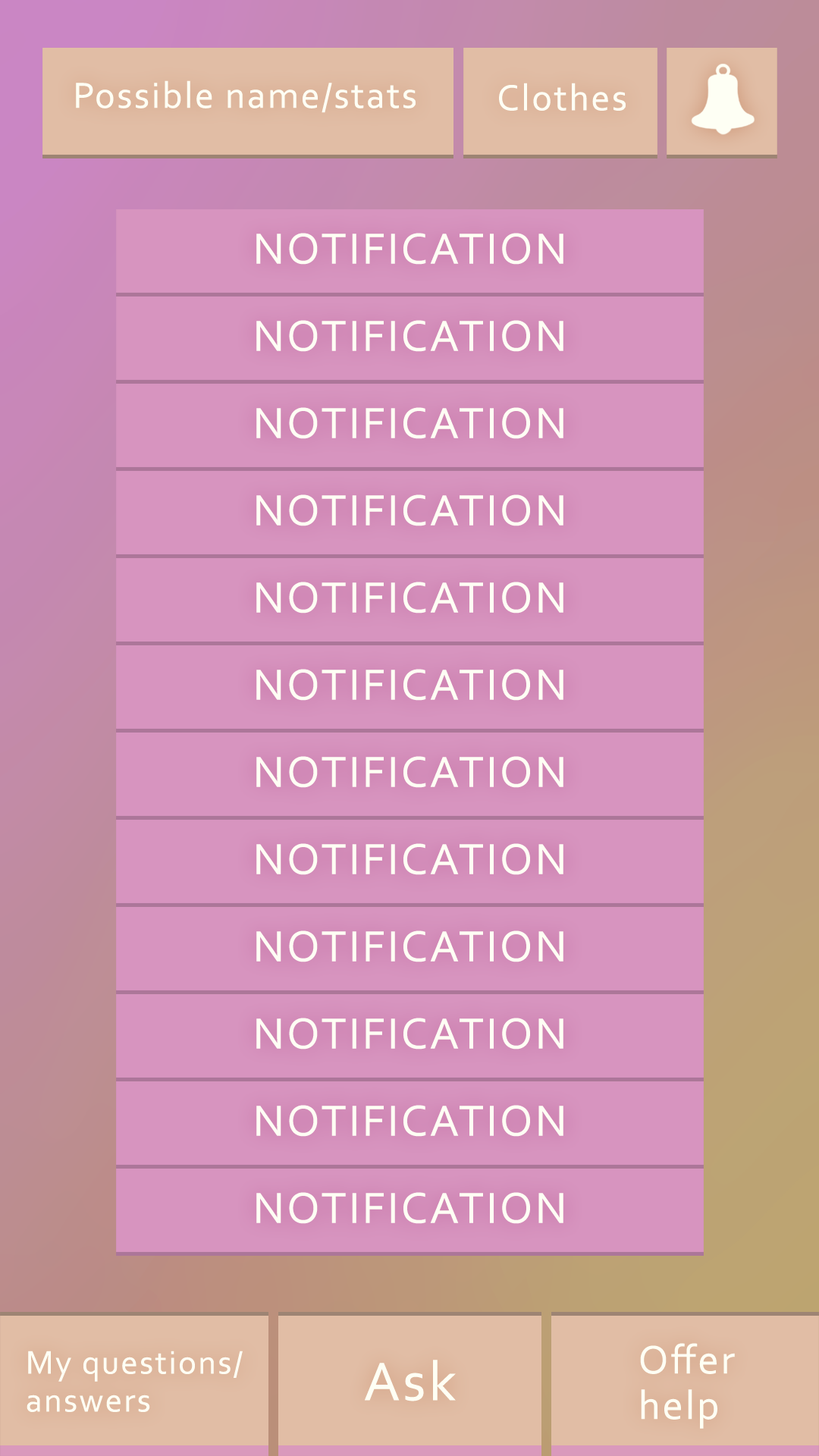
<style>
.page{position:relative;width:819px;height:1456px;background:#d794bf}
.page>*{position:absolute;margin:0}
.t1{font:37.9px "Corbel";letter-spacing:0.05em;color:#fefff4}
.t2{font:45.5px/87.2px "Corbel";letter-spacing:0.05em;color:#fefff4}
.t3{font:41.7px/45.5px "Corbel";letter-spacing:0.05em;color:#fefff4}
.t4{font:34.1px/37.9px "Corbel";letter-spacing:0.05em;color:#fefff4}
.t5{font:56.9px "Corbel";letter-spacing:0.05em;color:#fefff4}
</style>
<div class="page">
<p class="t1" style="left:76px;top:80px;width:340px;height:33px">Possible name/stats</p>
<p class="t1" style="left:499px;top:83px;width:127px;height:28px">Clothes</p>
<p class="t2" style="left:256px;top:233px;width:307px;height:991px;text-align:center">NOTIFICATION<br>NOTIFICATION<br>NOTIFICATION<br>NOTIFICATION<br>NOTIFICATION<br>NOTIFICATION<br>NOTIFICATION<br>NOTIFICATION<br>NOTIFICATION<br>NOTIFICATION<br>NOTIFICATION<br>NOTIFICATION</p>
<p class="t3" style="left:640px;top:1343px;width:95px;height:86px">Offer<br>help</p>
<p class="t4" style="left:27px;top:1351px;width:216px;height:61px">My questions/<br>answers</p>
<p class="t5" style="left:365px;top:1360px;width:91px;height:41px">Ask</p>
</div>
